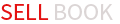
<style>
.page{position:relative;width:120px;height:24px;background:#ffffff}
.page>*{position:absolute;margin:0}
.t1{font:24px "SourceSansPro-Regular";color:#e41111}
.t2{font:24px "SourceSansPro-Regular";color:#dbd5d5}
</style>
<div class="page">
<p class="t1" style="left:1px;top:4px;width:112px;height:16px">SELL <span class="t2">BOOK</span></p>
</div>
